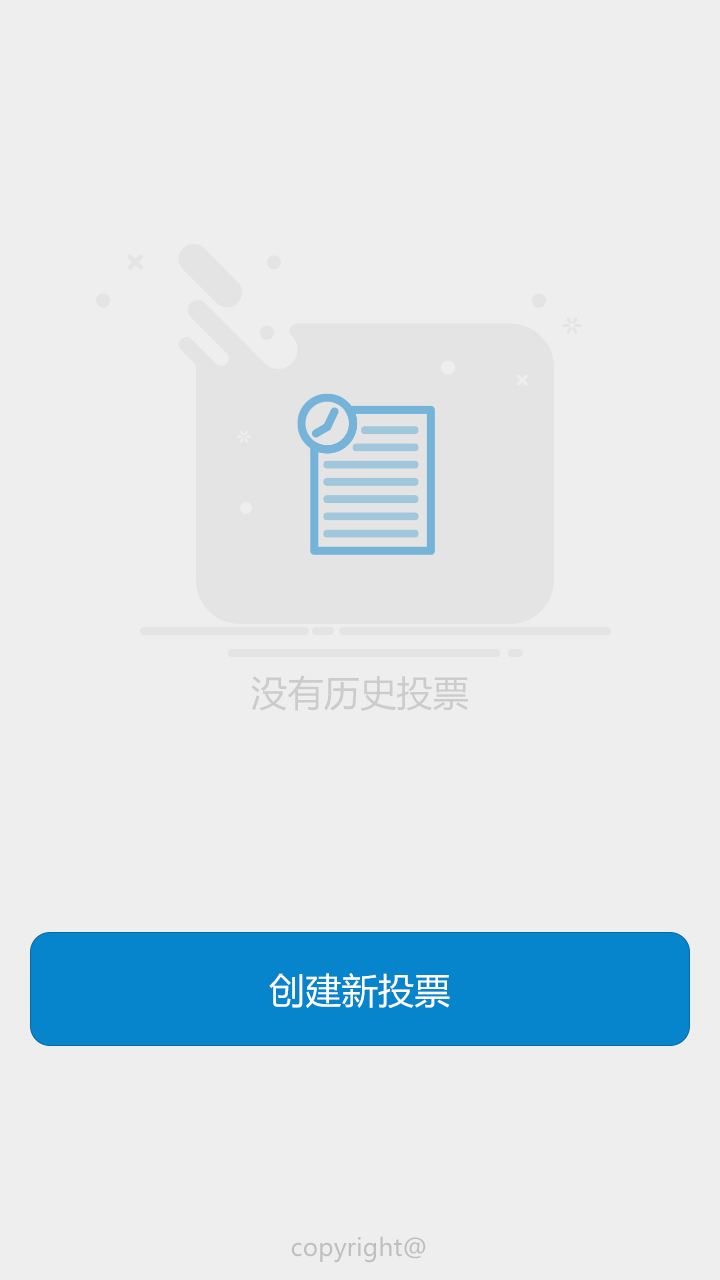
<style>
.page{position:relative;width:720px;height:1280px;background:#eeeeee}
.page>*{position:absolute;margin:0}
.t1{font:36px "MicrosoftYaHeiUI";letter-spacing:0.01em;color:#cccccc}
.t2{font:36px "MicrosoftYaHeiUI";letter-spacing:0.01em;color:#ffffff}
.t3{font:24px "MicrosoftYaHeiUI";letter-spacing:0.01em;color:#bfbfbf}
</style>
<div class="page">
<p class="t1" style="left:251px;top:675px;width:217px;height:36px">没有历史投票</p>
<p class="t2" style="left:269px;top:973px;width:181px;height:35px">创建新投票</p>
<p class="t3" style="left:291px;top:1236px;width:135px;height:27px">copyright@</p>
</div>
